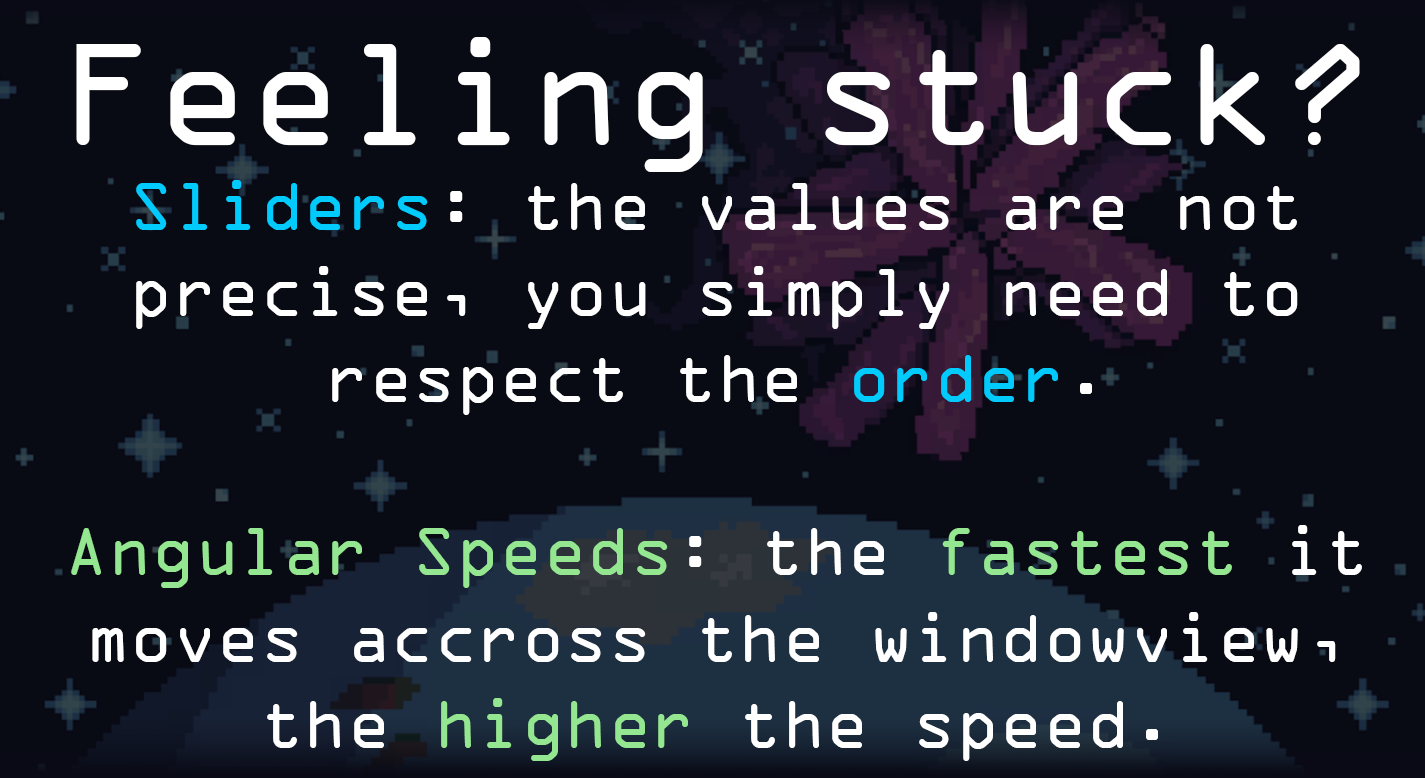
<style>
.page{position:relative;width:1425px;height:778px;background:#080a14}
.page>*{position:absolute;margin:0}
.t1{font:155px "OCRAExtended";color:#ffffff}
.t2{font:72px "OCRAExtended";color:#ffffff}
.t3{font:72px "OCRAExtended";color:#01cafc}
.t4{font:72px "OCRAExtended";color:#95e691}
</style>
<div class="page">
<p class="t1" style="left:76px;top:37px;width:1284px;height:135px">Feeling stuck?</p>
<p class="t2" style="left:71px;top:180px;width:1291px;height:581px;text-align:center"><span class="t3">Sliders</span>: the values are not   precise, you simply need to respect the <span class="t3">order</span>.<br><br><span class="t4">Angular Speeds</span>: the <span class="t4">fastest </span>it moves accross the windowview, the <span class="t4">higher </span>the speed.</p>
</div>
